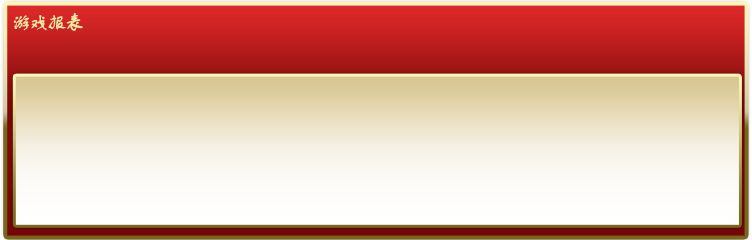
<style>
.page{position:relative;width:752px;height:240px}
.page>*{position:absolute;margin:0}
.t1{font:20px "FZSTK--GBK1-0";letter-spacing:-0.14em;color:#f1e8a5;font-weight:bold}
</style>
<div class="page">
<p class="t1" style="left:13px;top:13px;width:70px;height:18px">游戏报表</p>
</div>
